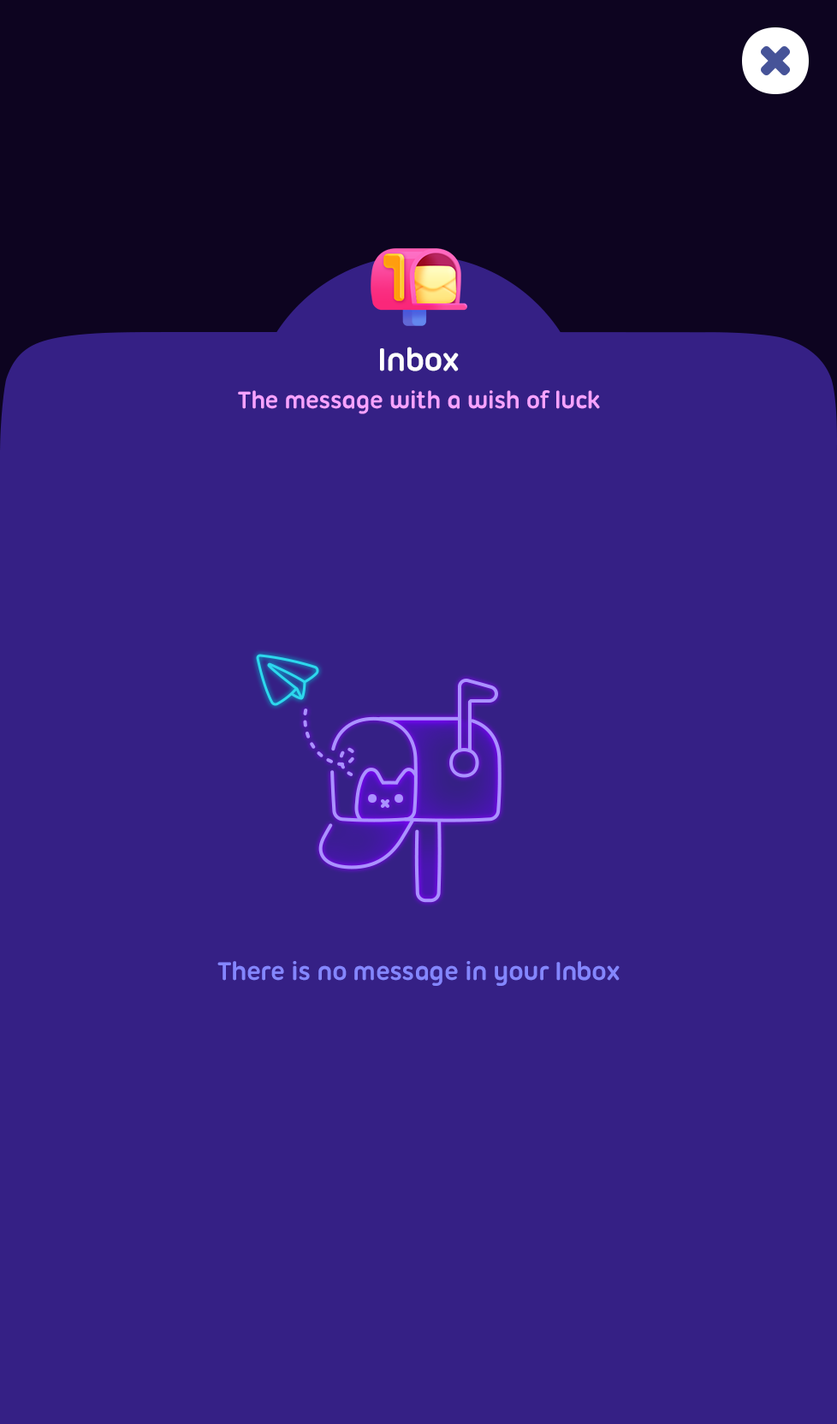
<style>
.page{position:relative;width:837px;height:1424px;background:#352085}
.page>*{position:absolute;margin:0}
.t1{font:34.2px "UbuntuTitling-Bold";letter-spacing:-0.025em;color:#ffffff}
.t2{font:25.7px "UbuntuTitling-Bold";letter-spacing:-0.025em;color:#f7a2ff}
.t3{font:27.4px "UbuntuTitling-Bold";letter-spacing:-0.025em;color:#8486ff}
</style>
<div class="page">
<p class="t1" style="left:380px;top:347px;width:79px;height:25px">Inbox</p>
<p class="t2" style="left:238px;top:390px;width:362px;height:24px">The message with a wish of luck</p>
<p class="t3" style="left:217px;top:961px;width:403px;height:25px">There is no message in your Inbox</p>
</div>
